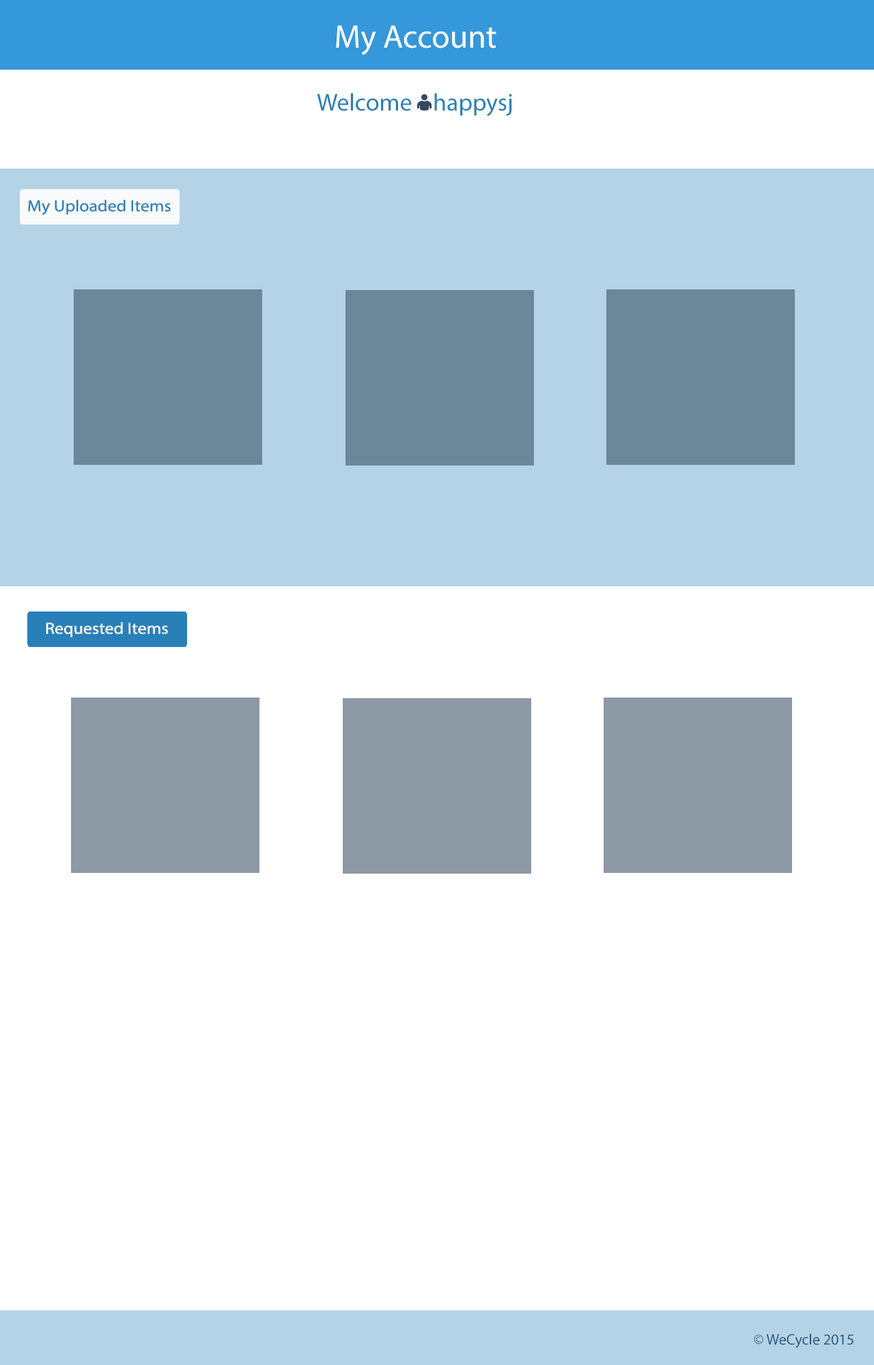
<style>
.page{position:relative;width:874px;height:1365px;background:#ffffff}
.page>*{position:absolute;margin:0}
.t1{font:32.8px "MyriadPro-Regular";color:#ffffff}
.t2{font:24.6px "MyriadPro-Regular";color:#2980b9}
.t3{font:16.1px "MyriadPro-Regular";color:#2980b9;scale:1.1 1}
.t4{font:16.1px "MyriadPro-Regular";color:#ffffff;scale:1.1 1}
.t5{font:15.2px "MyriadPro-Regular";color:#2b5575}
</style>
<div class="page">
<p class="t1" style="left:336px;top:25px;width:160px;height:30px">My Account</p>
<p class="t2" style="left:317px;top:93px;width:195px;height:23px">Welcome    happysj</p>
<p class="t3" style="left:28px;top:199px;width:143px;height:16px">My Uploaded Items</p>
<p class="t4" style="left:46px;top:622px;width:122px;height:15px">Requested Items</p>
<p class="t5" style="left:753px;top:1334px;width:100px;height:14px">© WeCycle 2015</p>
</div>
